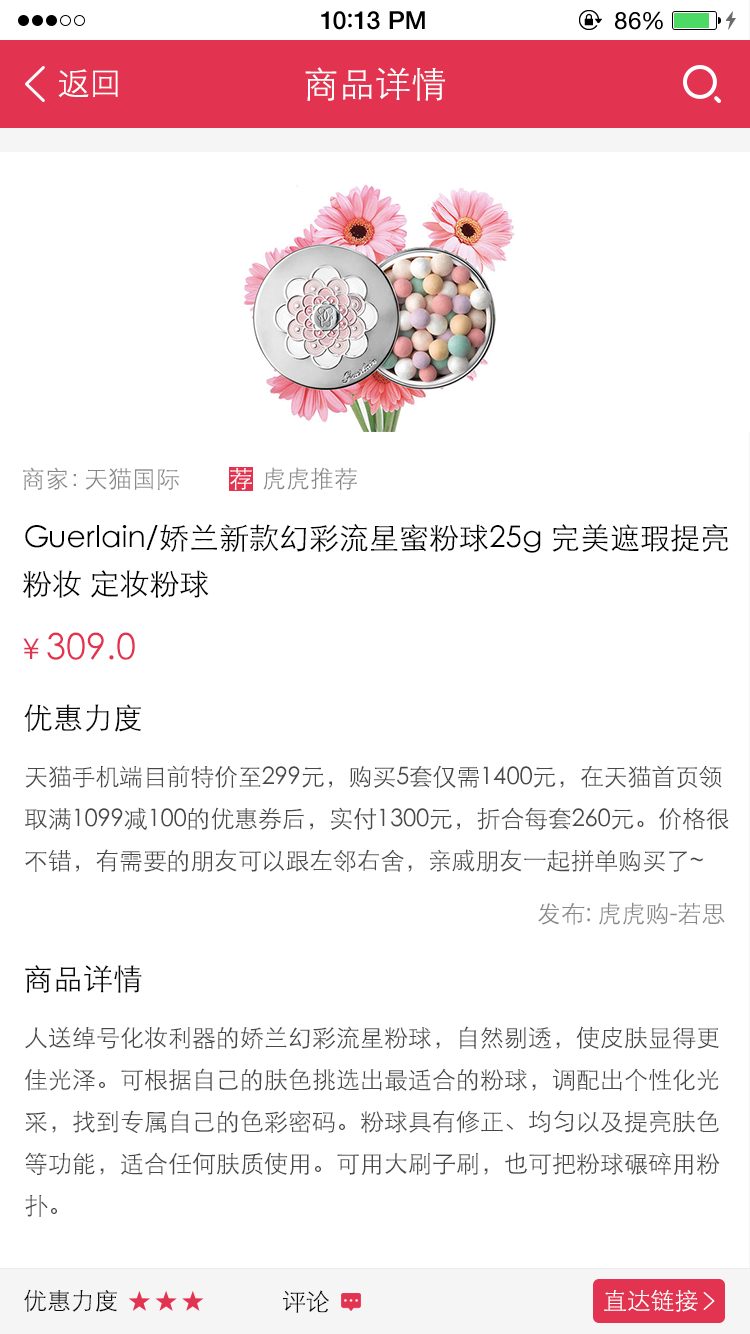
<style>
.page{position:relative;width:750px;height:1334px;background:#ffffff}
.page>*{position:absolute;margin:0}
.t1{font:25px "HelveticaNeue-Medium";letter-spacing:0.015em;color:#000000}
.t2{font:25px "ArialRoundedMTBold";letter-spacing:0.015em;color:#000000}
.t3{font:24px "HelveticaNeue";letter-spacing:0.03em;color:#000000}
.t4{font:33px "STXihei";color:#ffffff}
.t5{font:36px "STXihei";color:#ffffff}
.t6{font:24px "STXihei";color:#888888}
.t7{font:24px "STXihei";color:#ffffff}
.t8{font:30px/40px "STXihei";color:#000000}
.t9{font:36px "STXihei";color:#e23351}
.t10{font:30px "STXihei";color:#e23351}
.t11{font:30px "STXihei";color:#0a0a0a}
.t12{font:24px/36px "STXihei";letter-spacing:-0.01em;color:#48484a}
.t13{font:24px/36px "STXihei";color:#48484a}
.t14{font:24px "STXihei";letter-spacing:-0.01em;color:#0a0a0a}
.t15{font:24px "STXihei";letter-spacing:-0.01em;color:#ffffff}
</style>
<div class="page">
<p class="t1" style="left:321px;top:11px;width:104px;height:19px">10<span class="t2">:</span>13 PM</p>
<p class="t3" style="left:615px;top:11px;width:48px;height:19px">86%</p>
<p class="t4" style="left:58px;top:69px;width:60px;height:29px">返回</p>
<p class="t5" style="left:305px;top:67px;width:140px;height:34px">商品详情</p>
<p class="t6" style="left:23px;top:467px;width:53px;height:23px">商家：</p>
<p class="t6" style="left:85px;top:468px;width:94px;height:22px">天猫国际</p>
<p class="t7" style="left:230px;top:467px;width:22px;height:23px">荐</p>
<p class="t6" style="left:263px;top:467px;width:94px;height:23px">虎虎推荐</p>
<p class="t8" style="left:22px;top:523px;width:707px;height:75px">Guerlain/娇兰新款幻彩流星蜜粉球25g 完美遮瑕提亮<br>粉妆 定妆粉球</p>
<p class="t9" style="left:23px;top:632px;width:112px;height:28px"><span class="t10">￥</span>309.0</p>
<p class="t11" style="left:24px;top:704px;width:117px;height:28px">优惠力度</p>
<p class="t12" style="left:25px;top:765px;width:704px;height:107px">天猫手机端目前特价至299元，购买5套仅需1400元，在天猫首页领<br>取满1099减100的优惠券后，实付1300元，折合每套260元。价格很<br>不错，有需要的朋友可以跟左邻右舍，亲戚朋友一起拼单购买了~</p>
<p class="t6" style="left:538px;top:902px;width:187px;height:23px">发布: 虎虎购-若思</p>
<p class="t11" style="left:25px;top:965px;width:117px;height:28px">商品详情</p>
<p class="t13" style="left:24px;top:1026px;width:696px;height:191px">人送绰号化妆利器的娇兰幻彩流星粉球，自然剔透，使皮肤显得更<br>佳光泽。可根据自己的肤色挑选出最适合的粉球，调配出个性化光<br>采，找到专属自己的色彩密码。粉球具有修正、均匀以及提亮肤色<br>等功能，适合任何肤质使用。可用大刷子刷，也可把粉球碾碎用粉<br>扑。</p>
<p class="t14" style="left:24px;top:1289px;width:93px;height:23px">优惠力度</p>
<p class="t15" style="left:604px;top:1289px;width:94px;height:23px">直达链接</p>
<p class="t14" style="left:283px;top:1290px;width:46px;height:23px">评论</p>
</div>
